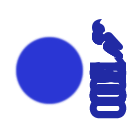
<style>
.page{position:relative;width:140px;height:140px;background:#ffffff}
.page>*{position:absolute;margin:0}
.t1{font:51.6px "PFDinTextCondPro-Bold";letter-spacing:-0.025em;color:#212aa4;text-transform:uppercase}
</style>
<div class="page">
<p class="t1" style="left:89px;top:57px;width:38px;height:62px;rotate:90deg">100</p>
<p class="t1" style="left:89px;top:62px;width:38px;height:44px;rotate:90deg">70</p>
<p class="t1" style="left:89px;top:63px;width:38px;height:43px;rotate:90deg">50</p>
<p class="t1" style="left:89px;top:62px;width:38px;height:44px;rotate:90deg">30</p>
<p class="t1" style="left:89px;top:66px;width:38px;height:38px;rotate:90deg">10</p>
</div>
